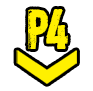
<style>
.page{position:relative;width:93px;height:91px;background:#ffffff}
.page>*{position:absolute;margin:0}
.t1{font:60px "CFJacquesParizeau-Regular";color:#fff000}
</style>
<div class="page">
<p class="t1" style="left:27px;top:9px;width:41px;height:40px">P4</p>
</div>
